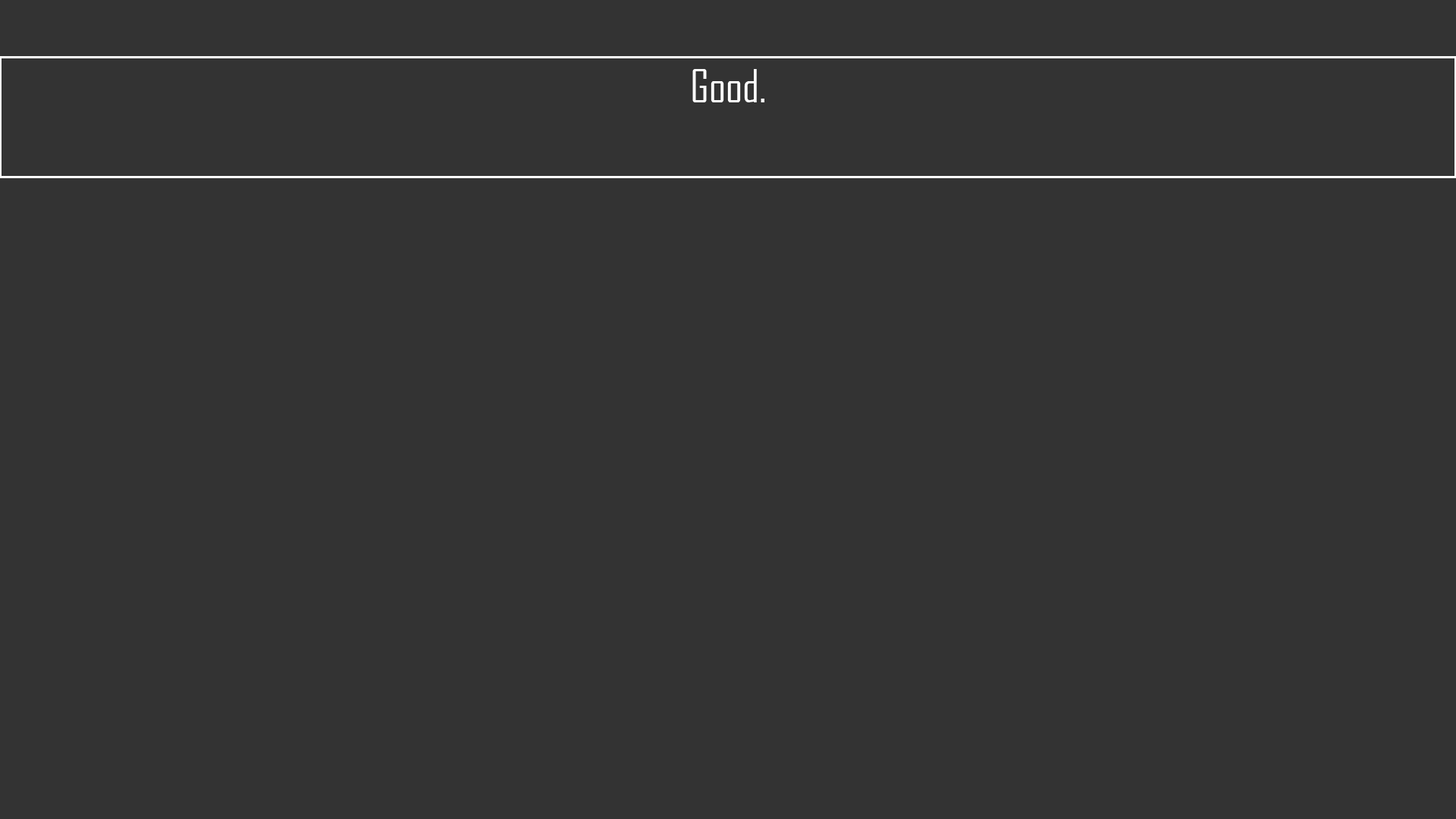
<style>
.page{position:relative;width:1456px;height:819px;background:#333333}
.page>*{position:absolute;margin:0}
.t1{font:44.2px "AgencyFB-Reg";color:#ffffff}
</style>
<div class="page">
<p class="t1" style="left:692px;top:69px;width:72px;height:33px">Good.</p>
</div>
